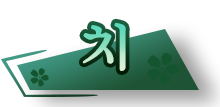
<style>
.page{position:relative;width:220px;height:107px;background:#ffffff}
.page>*{position:absolute;margin:0}
.t1{font:55.7px "SDKukdetopokki-aLt";letter-spacing:0.06em}
</style>
<div class="page">
<p class="t1" style="left:82px;top:22px;width:44px;height:49px">치</p>
</div>
